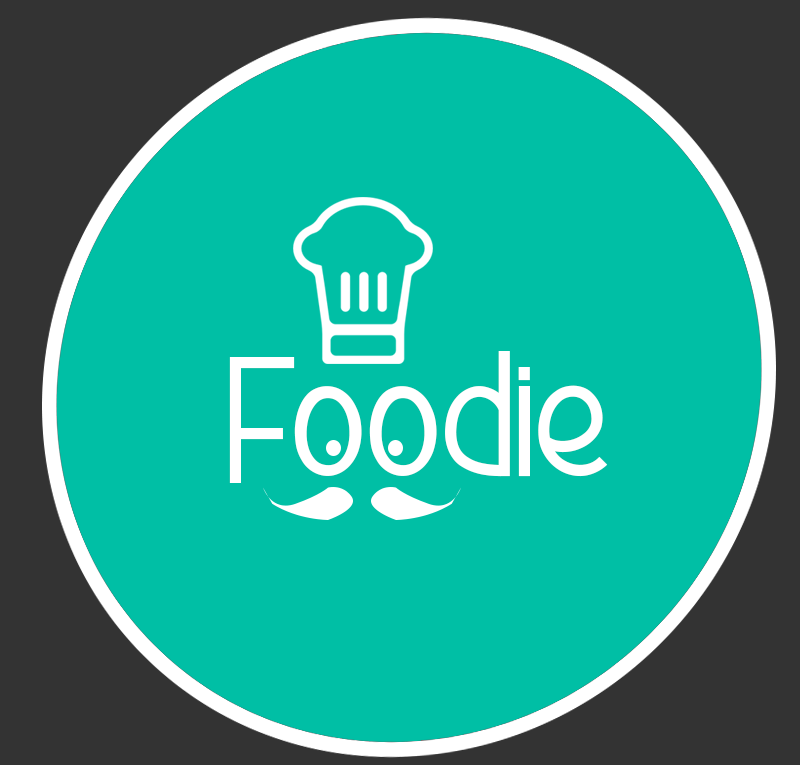
<style>
.page{position:relative;width:800px;height:765px;background:#00bfa5}
.page>*{position:absolute;margin:0}
.t1{font:180px "PeanutButterCookies";color:#ffffff}
</style>
<div class="page">
<p class="t1" style="left:229px;top:351px;width:379px;height:132px">Foodie</p>
</div>
